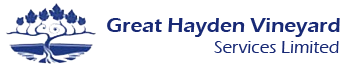
<style>
.page{position:relative;width:350px;height:70px;background:#ffffff}
.page>*{position:absolute;margin:0}
.t1{font:21px "ErasITC-Demi";color:#182975}
.t2{font:18px "ErasITC-Medium";color:#182975}
</style>
<div class="page">
<p class="t1" style="left:107px;top:18px;width:233px;height:19px">Great Hayden Vineyard</p>
<p class="t2" style="left:214px;top:41px;width:125px;height:12px">Services Limited</p>
</div>
